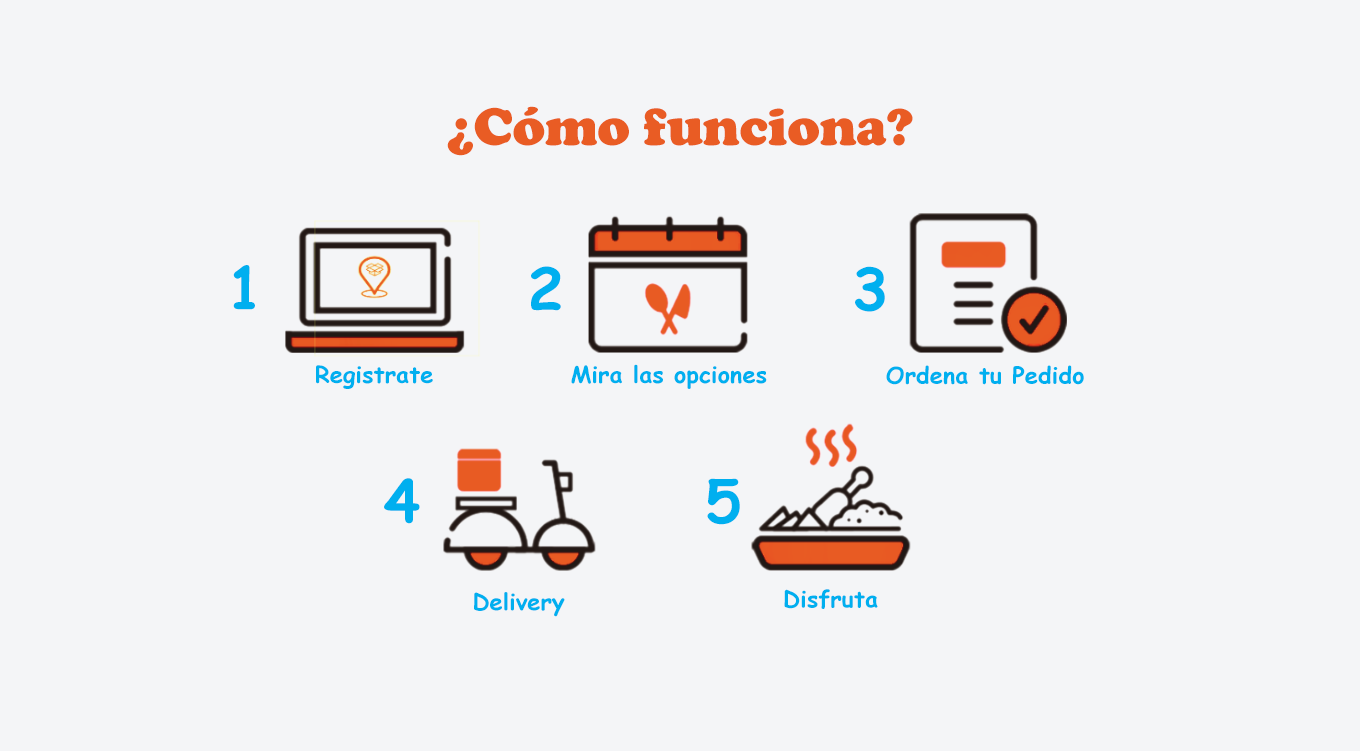
<style>
.page{position:relative;width:1360px;height:751px;background:#f4f5f7}
.page>*{position:absolute;margin:0}
.t1{font:54.2px "CooperBlack";color:#e95c24}
.t2{font:58.3px "ComicSansMS-Bold";color:#00afef}
.t3{font:22.9px "ComicSansMS-Bold";color:#00afef}
</style>
<div class="page">
<p class="t1" style="left:447px;top:106px;width:466px;height:50px">¿Cómo funciona?</p>
<p class="t2" style="left:233px;top:265px;width:22px;height:45px">1</p>
<p class="t2" style="left:531px;top:266px;width:30px;height:45px">2</p>
<p class="t2" style="left:855px;top:266px;width:30px;height:46px">3</p>
<p class="t3" style="left:316px;top:365px;width:117px;height:24px">Registrate</p>
<p class="t3" style="left:571px;top:364px;width:196px;height:25px">Mira las opciones</p>
<p class="t3" style="left:886px;top:365px;width:198px;height:20px">Ordena tu Pedido</p>
<p class="t2" style="left:384px;top:478px;width:36px;height:46px">4</p>
<p class="t2" style="left:707px;top:478px;width:33px;height:47px">5</p>
<p class="t3" style="left:474px;top:592px;width:91px;height:25px">Delivery</p>
<p class="t3" style="left:784px;top:589px;width:94px;height:20px">Disfruta</p>
</div>
